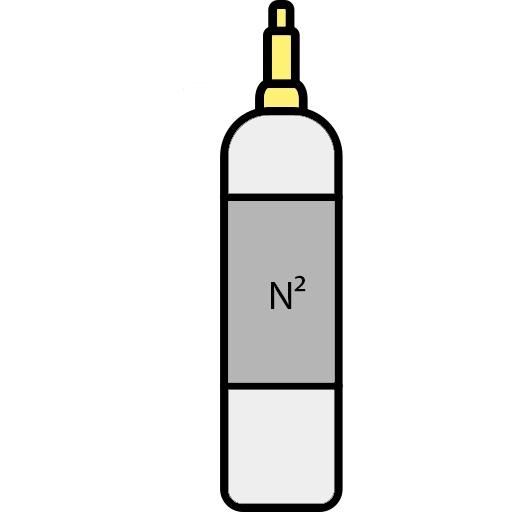
<style>
.page{position:relative;width:512px;height:512px;background:#ffffff}
.page>*{position:absolute;margin:0}
.t1{font:40px "MyriadPro-Regular";color:#000000}
</style>
<div class="page">
<p class="t1" style="left:271px;top:275px;width:35px;height:34px">N²</p>
</div>
